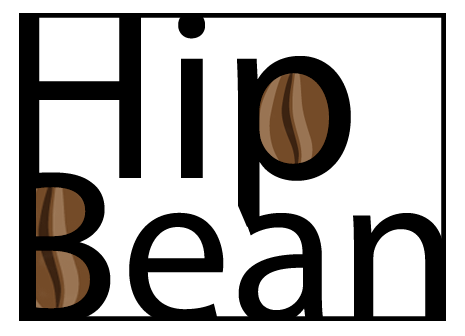
<style>
.page{position:relative;width:465px;height:336px;background:#ffffff}
.page>*{position:absolute;margin:0}
.t1{font:246.5px "MyriadPro-Regular";color:#000000}
.t2{font:220.2px "MyriadPro-Regular";color:#000000}
</style>
<div class="page">
<p class="t1" style="left:17px;top:11px;width:334px;height:216px">Hip</p>
<p class="t2" style="left:16px;top:172px;width:429px;height:153px">Bean</p>
</div>
